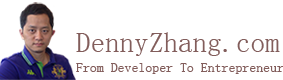
<style>
.page{position:relative;width:283px;height:80px;background:#ffffff}
.page>*{position:absolute;margin:0}
.t1{font:29.1px "SimSun";color:#825d5b}
.t2{font:13.9px "SimSun";color:#825d5b}
</style>
<div class="page">
<p class="t1" style="left:76px;top:32px;width:204px;height:24px">DennyZhang.com</p>
<p class="t2" style="left:76px;top:63px;width:208px;height:11px">From Developer To Entrepreneur</p>
</div>
